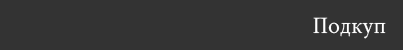
<style>
.page{position:relative;width:403px;height:50px;background:#333333}
.page>*{position:absolute;margin:0}
.t1{font:24px "CrimsonText-Regular";color:#ffffff}
</style>
<div class="page">
<p class="t1" style="left:313px;top:17px;width:73px;height:22px">Подкуп</p>
</div>
